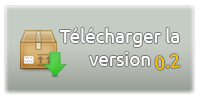
<style>
.page{position:relative;width:200px;height:100px;background:#c5ccc4}
.page>*{position:absolute;margin:0}
.t1{font:18.7px "Ubuntu-Regular";color:#ffffff}
.t2{font:18.7px "Ubuntu-Regular";color:#ffc600}
</style>
<div class="page">
<p class="t1" style="left:60px;top:28px;width:119px;height:38px;text-align:center">Télécharger la      version</p>
<p class="t2" style="left:155px;top:54px;width:25px;height:16px;rotate:-6deg">0.2</p>
</div>
